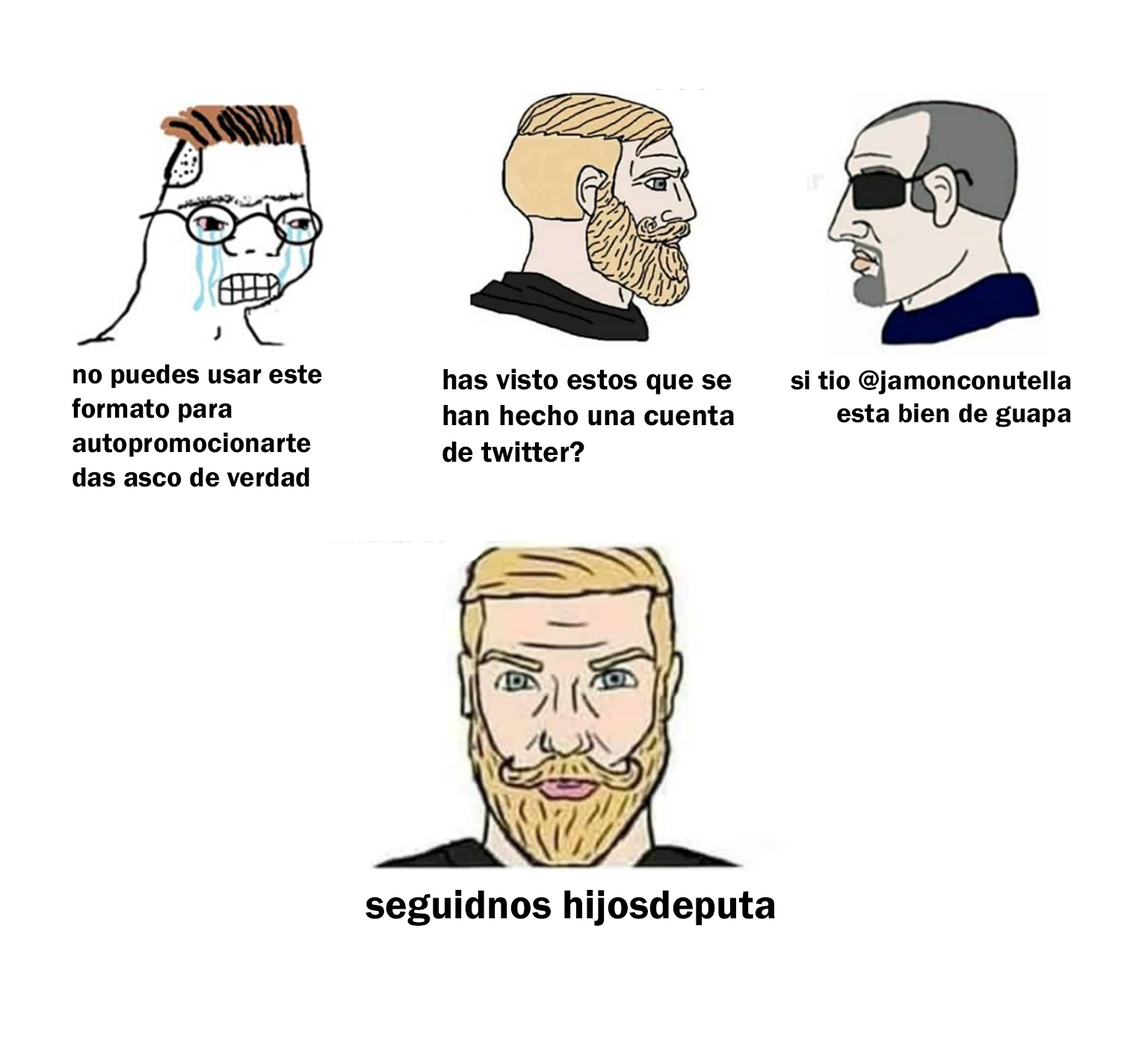
<style>
.page{position:relative;width:1121px;height:1064px;background:#ffffff}
.page>*{position:absolute;margin:0}
.t1{font:28.6px "FranklinGothic-Demi";color:#000000}
.t2{font:30.2px "FranklinGothic-Demi";color:#000000}
.t3{font:27.7px "FranklinGothic-Demi";color:#000000}
.t4{font:41.7px "FranklinGothic-Demi";color:#000000}
</style>
<div class="page">
<p class="t1" style="left:72px;top:364px;width:250px;height:123px">no puedes usar este <br>formato para <br>autopromocionarte<br>das asco de verdad</p>
<p class="t2" style="left:442px;top:368px;width:292px;height:94px">has visto estos que se<br>han hecho una cuenta<br>de twitter?</p>
<p class="t3" style="left:791px;top:370px;width:280px;height:57px;text-align:right">si tio @jamonconutella<br>esta bien de guapa</p>
<p class="t4" style="left:365px;top:890px;width:410px;height:36px">seguidnos hijosdeputa</p>
</div>
